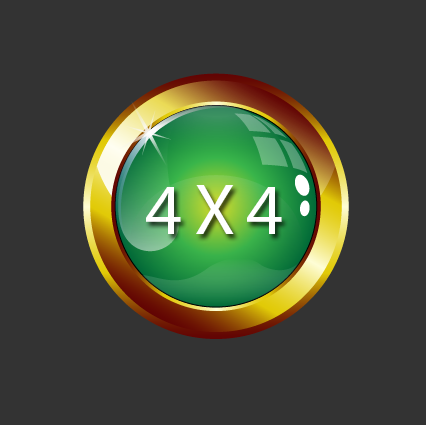
<style>
.page{position:relative;width:426px;height:425px;background:#333333}
.page>*{position:absolute;margin:0}
.t1{font:72px "MyriadPro-Regular";letter-spacing:-0.025em;color:#ffffff}
</style>
<div class="page">
<p class="t1" style="left:146px;top:185px;width:136px;height:49px">4 X 4</p>
</div>
